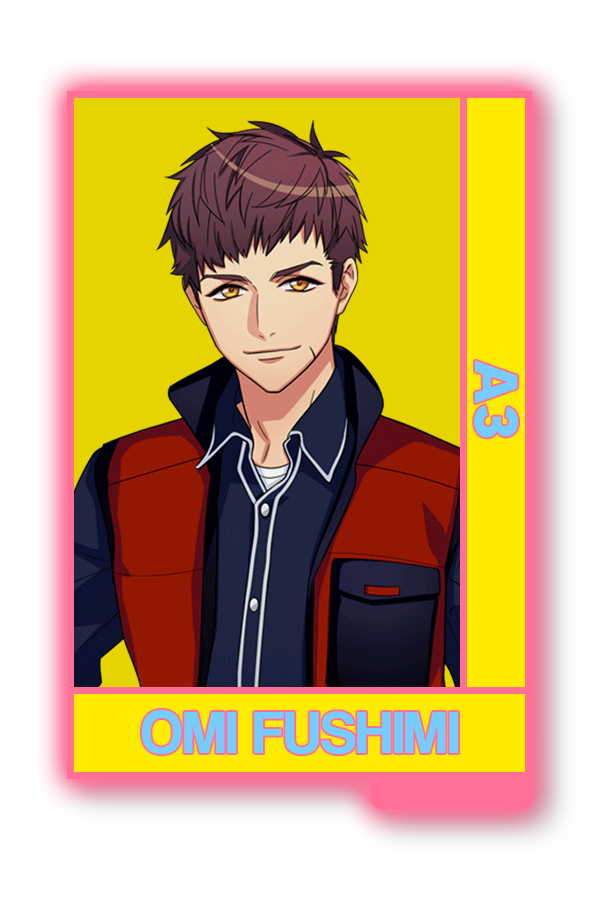
<style>
.page{position:relative;width:600px;height:900px;background:#ffffff}
.page>*{position:absolute;margin:0}
.t1{font:60.5px "MADETOMMY-Bold";color:#74ccff}
.t2{font:62.4px "CoolveticaRg-Regular";color:#74ccff}
</style>
<div class="page">
<p class="t1" style="left:474px;top:360px;width:44px;height:78px;rotate:90deg">A3</p>
<p class="t2" style="left:141px;top:710px;width:317px;height:44px">OMI FUSHIMI</p>
</div>
